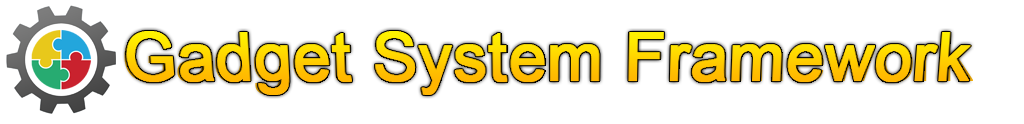
<style>
.page{position:relative;width:1024px;height:124px;background:#ffffff}
.page>*{position:absolute;margin:0}
.t1{font:66.7px "ArialMT";font-weight:bold}
</style>
<div class="page">
<p class="t1" style="left:124px;top:31px;width:849px;height:64px">Gadget System Framework</p>
</div>
